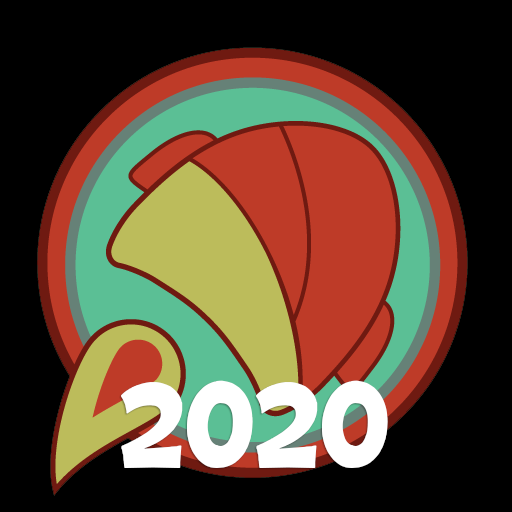
<style>
.page{position:relative;width:512px;height:512px;background:#000000}
.page>*{position:absolute;margin:0}
.t1{font:103.3px "BDCartoonShout";color:#ffffff}
</style>
<div class="page">
<p class="t1" style="left:121px;top:380px;width:267px;height:88px">2020</p>
</div>
